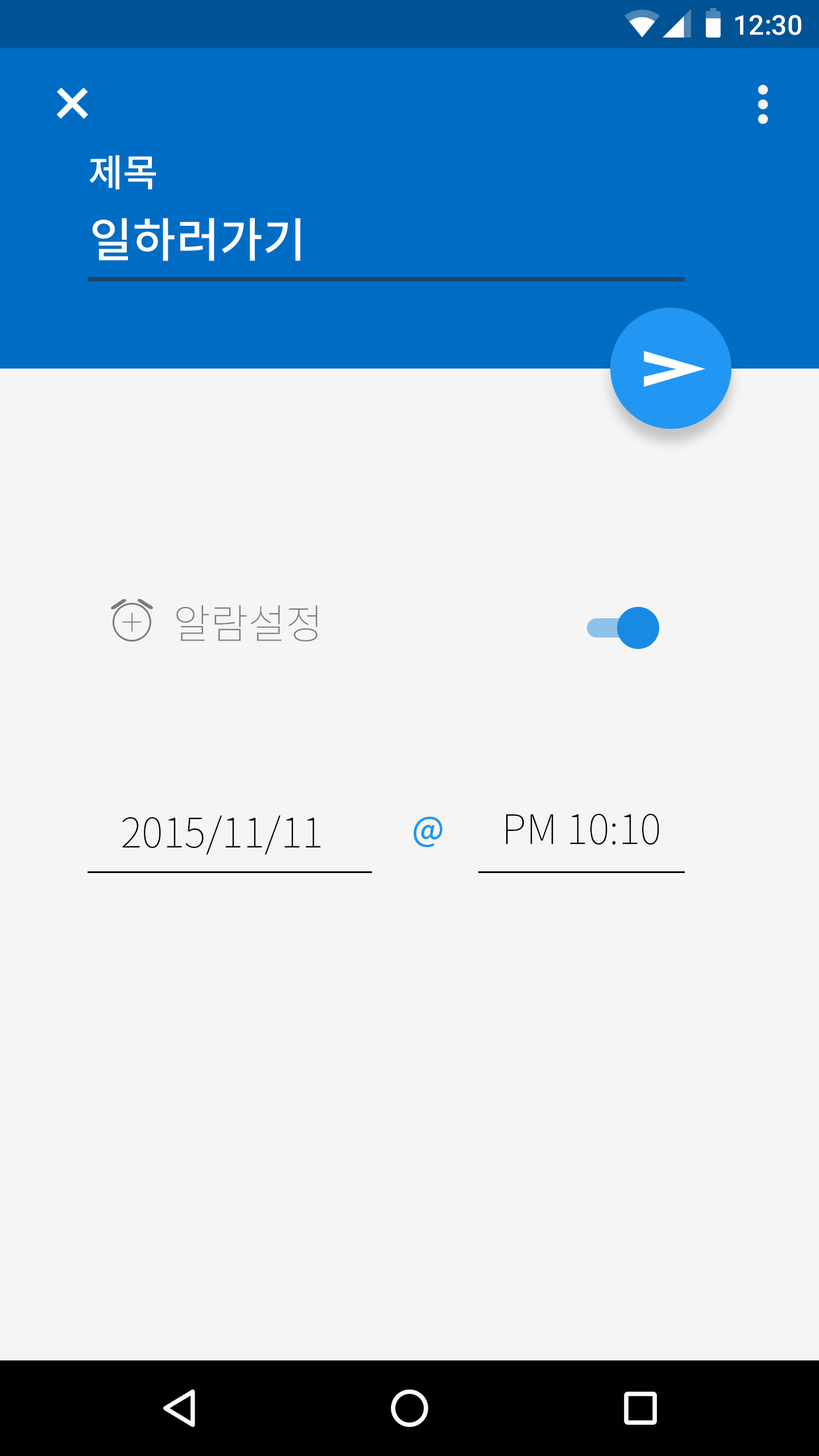
<style>
.page{position:relative;width:819px;height:1456px;background:#f5f5f5}
.page>*{position:absolute;margin:0}
.t1{font:27.3px "Roboto-Medium";color:#ffffff}
.t2{font:38px "NotoSansCJKkr-Medium";color:#ffffff}
.t3{font:47.1px "NotoSansCJKkr-Medium";color:#ffffff}
.t4{font:40.9px "NotoSansCJKkr-Thin";color:#7b7b7b}
.t5{font:40.9px "NotoSansCJKkr-Thin";color:#000000}
.t6{font:33.4px "NotoSansCJKkr-Medium";color:#2196f3}
</style>
<div class="page">
<p class="t1" style="left:735px;top:15px;width:66px;height:20px">12:30</p>
<p class="t2" style="left:89px;top:155px;width:67px;height:34px">제목</p>
<p class="t3" style="left:92px;top:218px;width:208px;height:43px">일하러가기</p>
<p class="t4" style="left:176px;top:605px;width:141px;height:37px">알람설정</p>
<p class="t5" style="left:122px;top:815px;width:199px;height:40px">2015/11/11</p>
<p class="t6" style="left:413px;top:816px;width:29px;height:31px">@</p>
<p class="t5" style="left:506px;top:813px;width:153px;height:32px">PM 10:10</p>
</div>
